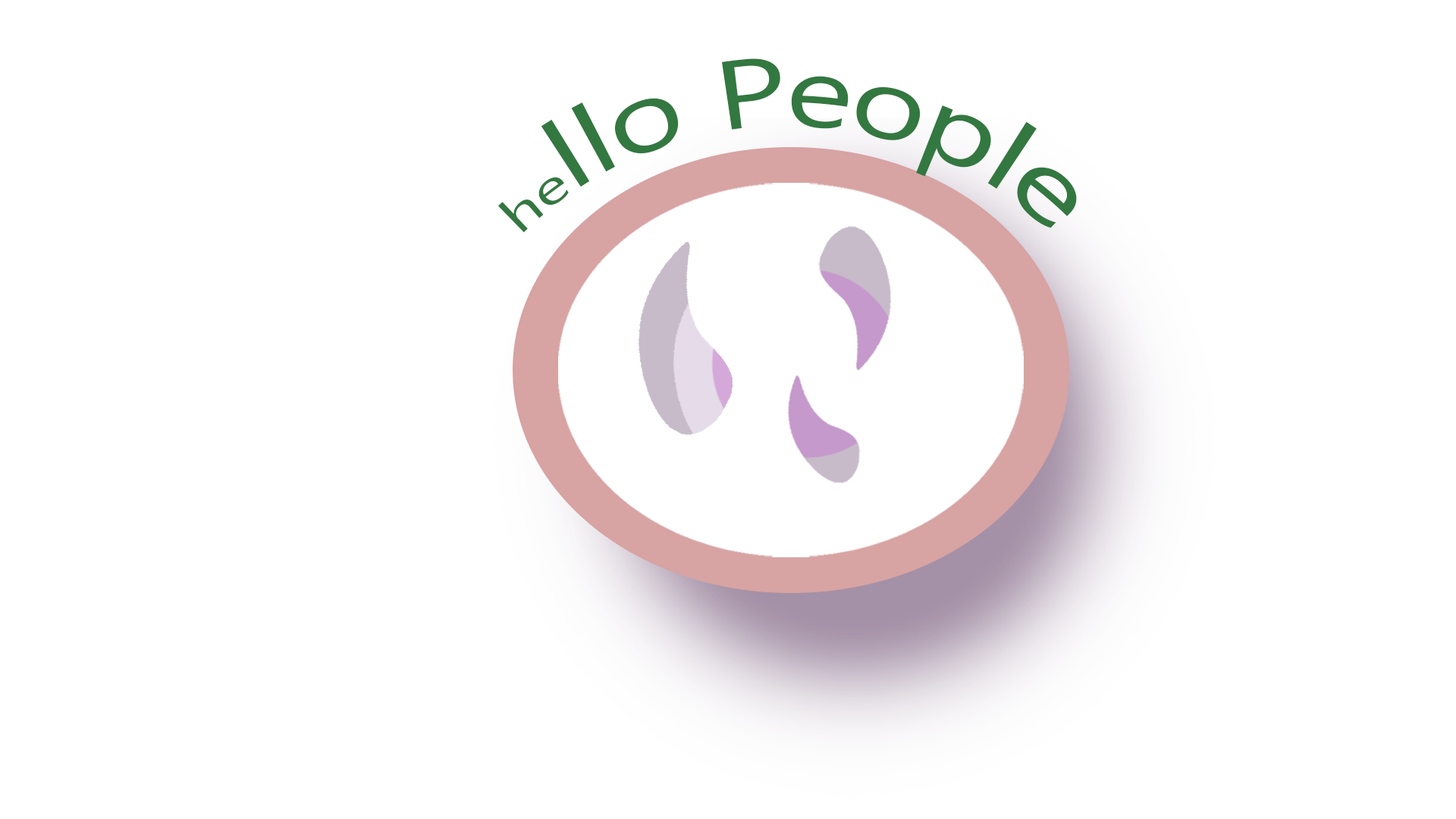
<style>
.page{position:relative;width:1456px;height:819px;background:#ffffff}
.page>*{position:absolute;margin:0}
.t1{font:98px "MicrosoftNewTaiLue";color:#337840}
.t2{font:49px "MicrosoftNewTaiLue";color:#337840}
</style>
<div class="page">
<p class="t1" style="left:498px;top:58px;width:579px;height:175px"><span class="t2">he</span>llo People</p>
</div>
